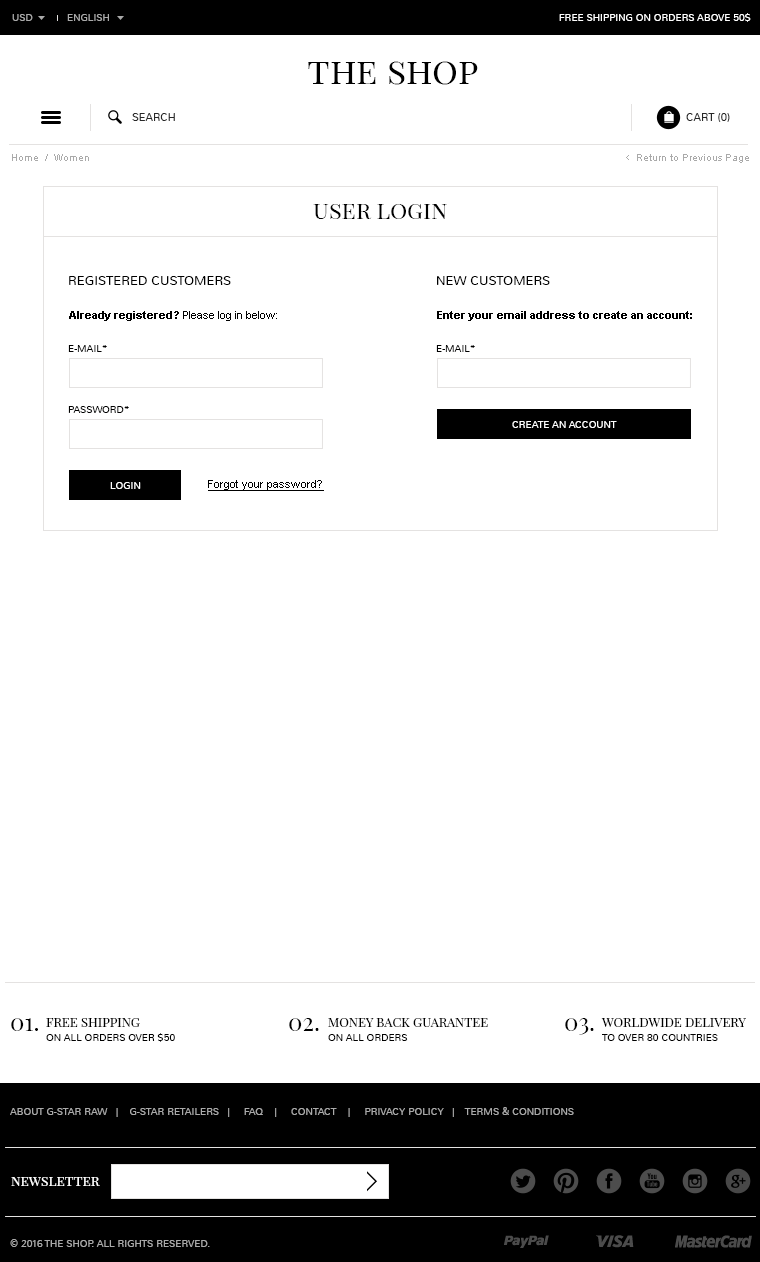
<style>
.page{position:relative;width:760px;height:1262px;background:#ffffff}
.page>*{position:absolute;margin:0}
.t1{font:10px "Nunito-Light";color:#aaaaaa;text-transform:uppercase}
.t2{font:10px "Nunito-Light";color:#ffffff;text-transform:uppercase}
.t3{font:36px "PlayfairDisplaySC-Regular";color:#000000}
.t4{font:11px "Nunito-Light";color:#282828;text-transform:uppercase}
.t5{font:10px "ArialMT";color:#aaaaaa}
.t6{font:12px "Cabin-Regular";color:#aaaaaa}
.t7{font:24px "PlayfairDisplaySC-Regular";color:#000000}
.t8{font:13px "Nunito-Light";color:#000000;text-transform:uppercase}
.t9{font:11px "ArialMT";color:#000000}
.t10{font:11px "Arial-BoldMT";color:#000000}
.t11{font:10px "Nunito-Light";color:#000000;text-transform:uppercase}
.t12{font:11px "ArialMT";color:#000000;text-decoration:underline}
.t13{font:13px "PlayfairDisplaySC-Regular";color:#000000;text-transform:uppercase}
.t14{font:14px "PlayfairDisplaySC-Regular";color:#ffffff}
</style>
<div class="page">
<p class="t1" style="left:12px;top:14px;width:21px;height:7px">usD</p>
<p class="t1" style="left:67px;top:14px;width:42px;height:7px">English</p>
<p class="t2" style="left:559px;top:13px;width:192px;height:9px">free shipping on orders above 50$</p>
<p class="t3" style="left:308px;top:61px;width:170px;height:24px">the shop</p>
<p class="t4" style="left:132px;top:113px;width:43px;height:8px">search</p>
<p class="t4" style="left:686px;top:113px;width:44px;height:9px">Cart (0)</p>
<p class="t5" style="left:12px;top:154px;width:77px;height:7px">Home  /  Women</p>
<p class="t6" style="left:626px;top:155px;width:3px;height:5px">&lt;</p>
<p class="t5" style="left:637px;top:154px;width:112px;height:9px">Return to Previous Page</p>
<p class="t7" style="left:313px;top:204px;width:134px;height:15px">user login</p>
<p class="t8" style="left:69px;top:276px;width:162px;height:9px">registered customers</p>
<p class="t8" style="left:437px;top:276px;width:113px;height:9px">new customers</p>
<p class="t9" style="left:69px;top:311px;width:208px;height:10px"><span class="t10">Already registered?</span> Please log in below:</p>
<p class="t10" style="left:437px;top:311px;width:255px;height:10px">Enter your email address to create an account:</p>
<p class="t11" style="left:68px;top:345px;width:39px;height:7px">e-mail*</p>
<p class="t11" style="left:436px;top:345px;width:39px;height:7px">e-mail*</p>
<p class="t11" style="left:68px;top:406px;width:61px;height:7px">password*</p>
<p class="t2" style="left:512px;top:421px;width:105px;height:7px">create an account</p>
<p class="t2" style="left:110px;top:482px;width:31px;height:7px">login</p>
<p class="t12" style="left:208px;top:480px;width:116px;height:11px">Forgot your password?</p>
<p class="t7" style="left:11px;top:1018px;width:27px;height:13px">01.</p>
<p class="t13" style="left:46px;top:1018px;width:94px;height:9px">Free Shipping</p>
<p class="t7" style="left:289px;top:1018px;width:30px;height:13px">02.</p>
<p class="t13" style="left:328px;top:1018px;width:160px;height:9px">Money back guarantee</p>
<p class="t7" style="left:565px;top:1018px;width:29px;height:17px">03.</p>
<p class="t13" style="left:601px;top:1018px;width:145px;height:9px">Worldwide Delivery</p>
<p class="t11" style="left:46px;top:1033px;width:129px;height:9px">On all orders over $50</p>
<p class="t11" style="left:328px;top:1034px;width:80px;height:7px">On all orders</p>
<p class="t11" style="left:602px;top:1034px;width:116px;height:7px">To over 80 countries</p>
<p class="t1" style="left:10px;top:1107px;width:564px;height:10px">About G-Star Raw   |    G-Star Retailers   |     FAQ    |     Contact    |     Privacy Policy   |    Terms &amp; Conditions</p>
<p class="t14" style="left:11px;top:1177px;width:89px;height:9px">newsletter</p>
<p class="t1" style="left:10px;top:1239px;width:200px;height:8px">© 2016 the shop. All Rights Reserved.</p>
</div>
